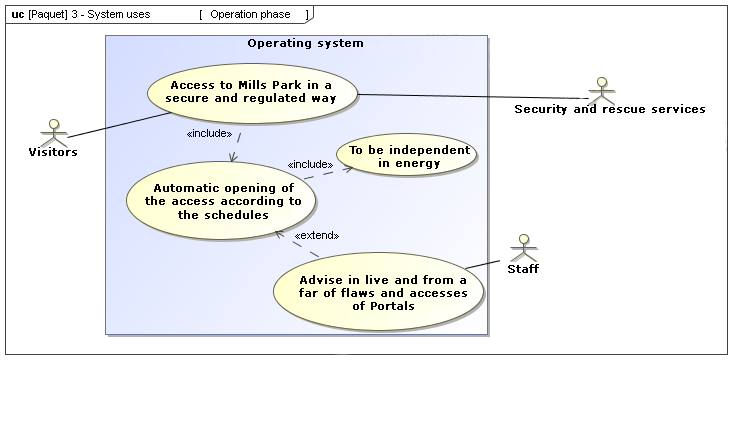
<style>
.page{position:relative;width:742px;height:421px;background:#ffffff}
.page>*{position:absolute;margin:0}
.t1{font:11px "ArialMT";color:#000000}
.t2{font:11px "Verdana";color:#000000;font-weight:bold}
</style>
<div class="page">
<p class="t1" style="left:88px;top:10px;width:62px;height:10px">System uses</p>
<p class="t1" style="left:211px;top:10px;width:79px;height:10px">Operation phase</p>
<p class="t2" style="left:248px;top:38px;width:115px;height:11px">Operating system</p>
<p class="t2" style="left:166px;top:80px;width:170px;height:24px;text-align:center">Access to Mills Park in a secure and regulated way</p>
<p class="t2" style="left:515px;top:104px;width:190px;height:11px">Security and rescue services</p>
<p class="t2" style="left:29px;top:147px;width:48px;height:9px">Visitors</p>
<p class="t2" style="left:349px;top:145px;width:121px;height:24px;text-align:center">To be independent <br>in energy</p>
<p class="t2" style="left:145px;top:183px;width:156px;height:36px;text-align:center">Automatic opening of the access according to the schedules</p>
<p class="t2" style="left:508px;top:264px;width:31px;height:9px">Staff</p>
<p class="t2" style="left:299px;top:275px;width:168px;height:35px;text-align:center">Advise in live and from a far of flaws and accesses of Portals</p>
</div>
